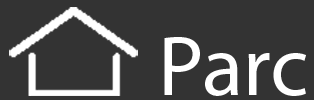
<style>
.page{position:relative;width:314px;height:100px;background:#333333}
.page>*{position:absolute;margin:0}
.t1{font:85.7px "MyriadPro-Regular";color:#ffffff}
</style>
<div class="page">
<p class="t1" style="left:164px;top:37px;width:142px;height:59px">Parc</p>
</div>
